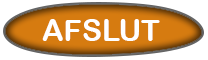
<style>
.page{position:relative;width:208px;height:60px;background:#ffffff}
.page>*{position:absolute;margin:0}
.t1{font:30px "ArialRoundedMTBold";color:#ffffff}
</style>
<div class="page">
<p class="t1" style="left:42px;top:19px;width:118px;height:22px">AFSLUT</p>
</div>
